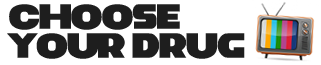
<style>
.page{position:relative;width:321px;height:65px;background:#ffffff}
.page>*{position:absolute;margin:0}
.t1{font:24px "Planet-of-the-Apes-Regular";color:#1e1e1e}
</style>
<div class="page">
<p class="t1" style="left:7px;top:4px;width:238px;height:55px;text-align:right">Choose your drug</p>
</div>
